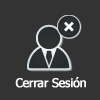
<style>
.page{position:relative;width:100px;height:100px;background:#333333}
.page>*{position:absolute;margin:0}
.t1{font:12px "Tahoma";letter-spacing:-0.025em;color:#ffffff;font-weight:bold}
</style>
<div class="page">
<p class="t1" style="left:15px;top:77px;width:71px;height:11px">Cerrar Sesión</p>
</div>
